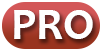
<style>
.page{position:relative;width:102px;height:51px;background:#ffffff}
.page>*{position:absolute;margin:0}
.t1{font:45px "Candara-Bold";color:#ffffff}
</style>
<div class="page">
<p class="t1" style="left:14px;top:10px;width:79px;height:29px">PRO</p>
</div>
